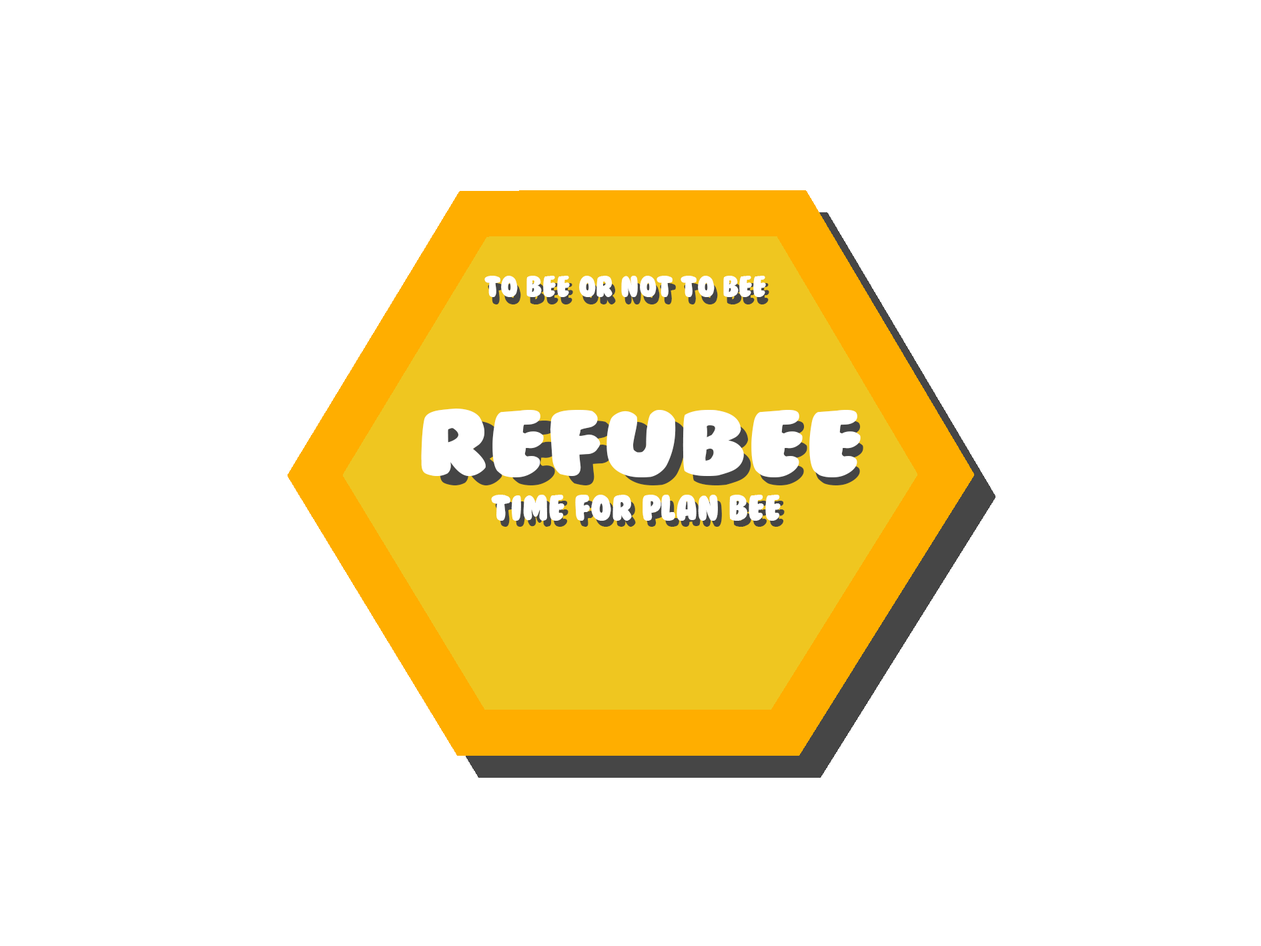
<style>
.page{position:relative;width:1261px;height:946px;background:#ffffff}
.page>*{position:absolute;margin:0}
.t1{font:27.8px "BubbleGum";color:#ffffff}
.t2{font:27.8px "BubbleGum"}
.t3{font:86.5px "BubbleGum";color:#ffffff;scale:1.33 1}
.t4{font:37.1px "BubbleGum";color:#ffffff;scale:1.33 1}
.t5{font:83.4px "BubbleGum";scale:1.33 1}
.t6{font:35.8px "BubbleGum";scale:1.33 1}
.t7{font:33.4px "BubbleGum";color:#ffffff}
.t8{font:33.4px "BubbleGum"}
</style>
<div class="page">
<p class="t1" style="left:484px;top:276px;width:282px;height:21px">To bee or not to bee</p>
<p class="t2" style="left:488px;top:283px;width:281px;height:21px">To bee or not to bee</p>
<p class="t3" style="left:421px;top:408px;width:440px;height:69px"><span class="t4"><br></span>Refubee</p>
<p class="t5" style="left:440px;top:420px;width:423px;height:66px"><span class="t6"><br></span>Refubee</p>
<p class="t7" style="left:491px;top:494px;width:290px;height:26px">Time for plan BEE</p>
<p class="t8" style="left:495px;top:500px;width:290px;height:26px">Time for plan BEE</p>
</div>
